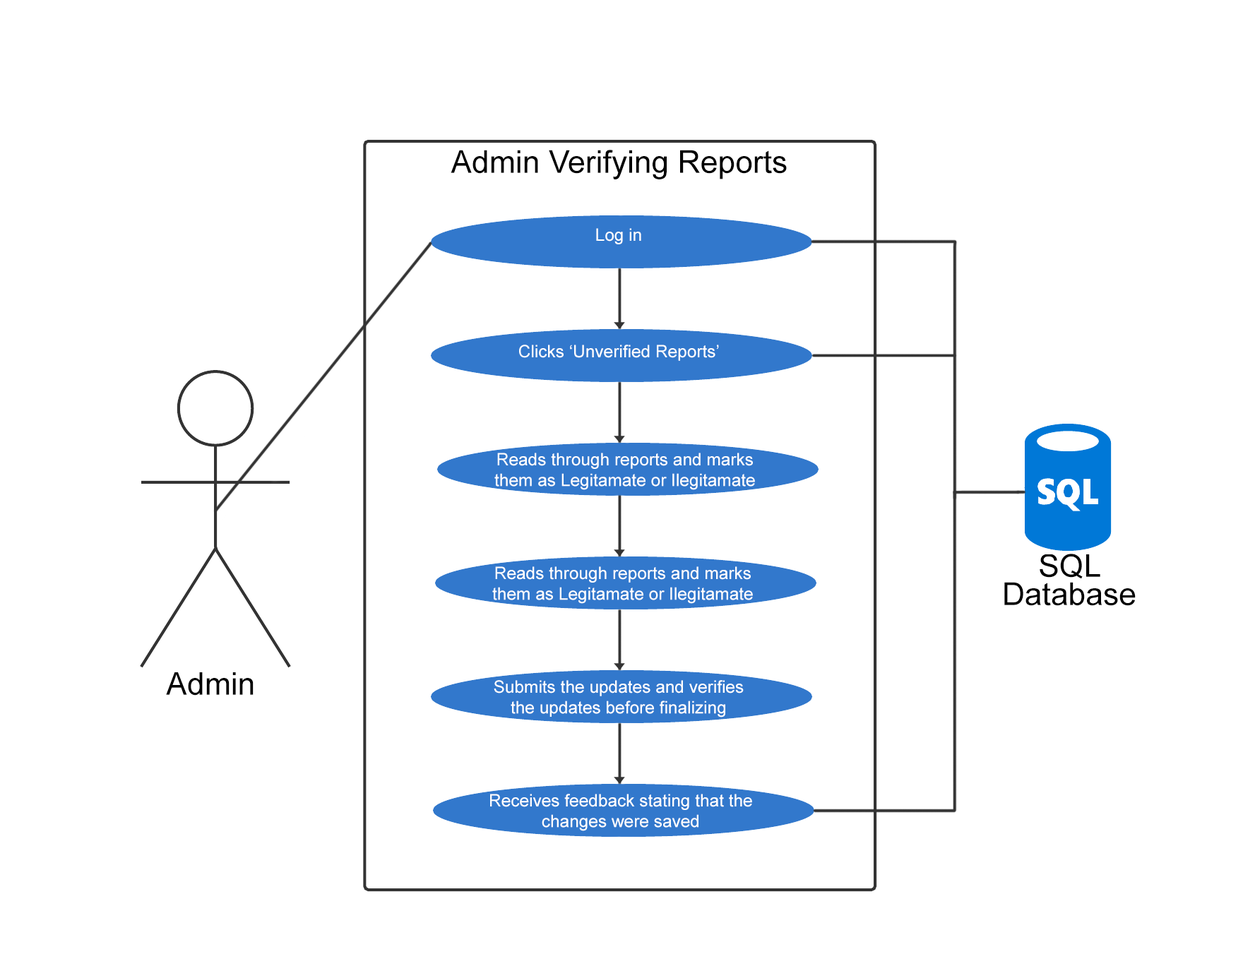
<style>
.page{position:relative;width:1243px;height:959px;background:#ffffff}
.page>*{position:absolute;margin:0}
.t1{font:31.4px "ArialMT";color:#000000}
.t2{font:17.3px "ArialMT";color:#ffffff}
.t3{font:31.4px/28.3px "ArialMT";color:#000000}
</style>
<div class="page">
<p class="t1" style="left:451px;top:150px;width:336px;height:29px">Admin Verifying Reports</p>
<p class="t2" style="left:596px;top:228px;width:45px;height:16px">Log in</p>
<p class="t2" style="left:519px;top:345px;width:200px;height:16px">Clicks ‘Unverified Reports’</p>
<p class="t2" style="left:494px;top:453px;width:261px;height:37px;text-align:center">Reads through reports and marks <br>them as Legitamate or Ilegitamate</p>
<p class="t3" style="left:1004px;top:554px;width:132px;height:52px;text-align:center">SQL<br>Database</p>
<p class="t2" style="left:492px;top:566px;width:261px;height:38px;text-align:center">Reads through reports and marks <br>them as Legitamate or Ilegitamate</p>
<p class="t1" style="left:166px;top:672px;width:88px;height:24px">Admin</p>
<p class="t2" style="left:494px;top:680px;width:250px;height:38px;text-align:center">Submits the updates and verifies<br>the updates before finalizing</p>
<p class="t2" style="left:490px;top:794px;width:262px;height:37px;text-align:center">Receives feedback stating that the<br>changes were saved</p>
</div>
